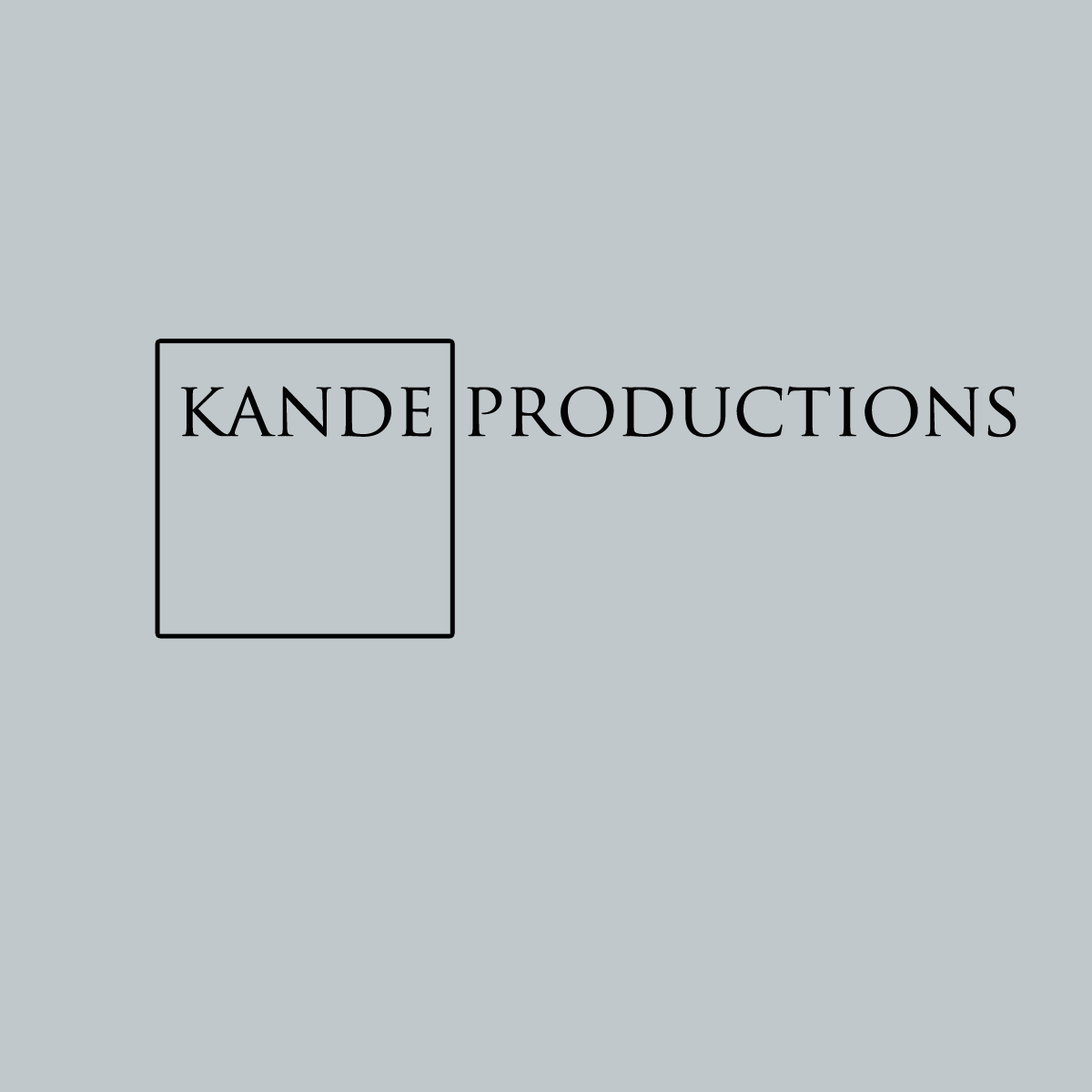
<style>
.page{position:relative;width:1092px;height:1092px;background:#c0c8cb}
.page>*{position:absolute;margin:0}
.t1{font:75.8px "TrajanPro-Regular";color:#030303}
</style>
<div class="page">
<p class="t1" style="left:180px;top:386px;width:836px;height:52px">kande productions</p>
</div>
